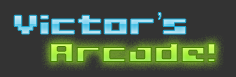
<style>
.page{position:relative;width:236px;height:77px;background:#333333}
.page>*{position:absolute;margin:0}
.t1{font:30px "04b09"}
.t2{font:30px "ArialMT"}
</style>
<div class="page">
<p class="t1" style="left:14px;top:12px;width:172px;height:22px">Victor<span class="t2">’</span>s</p>
<p class="t1" style="left:50px;top:43px;width:166px;height:19px">Arcade!</p>
</div>
